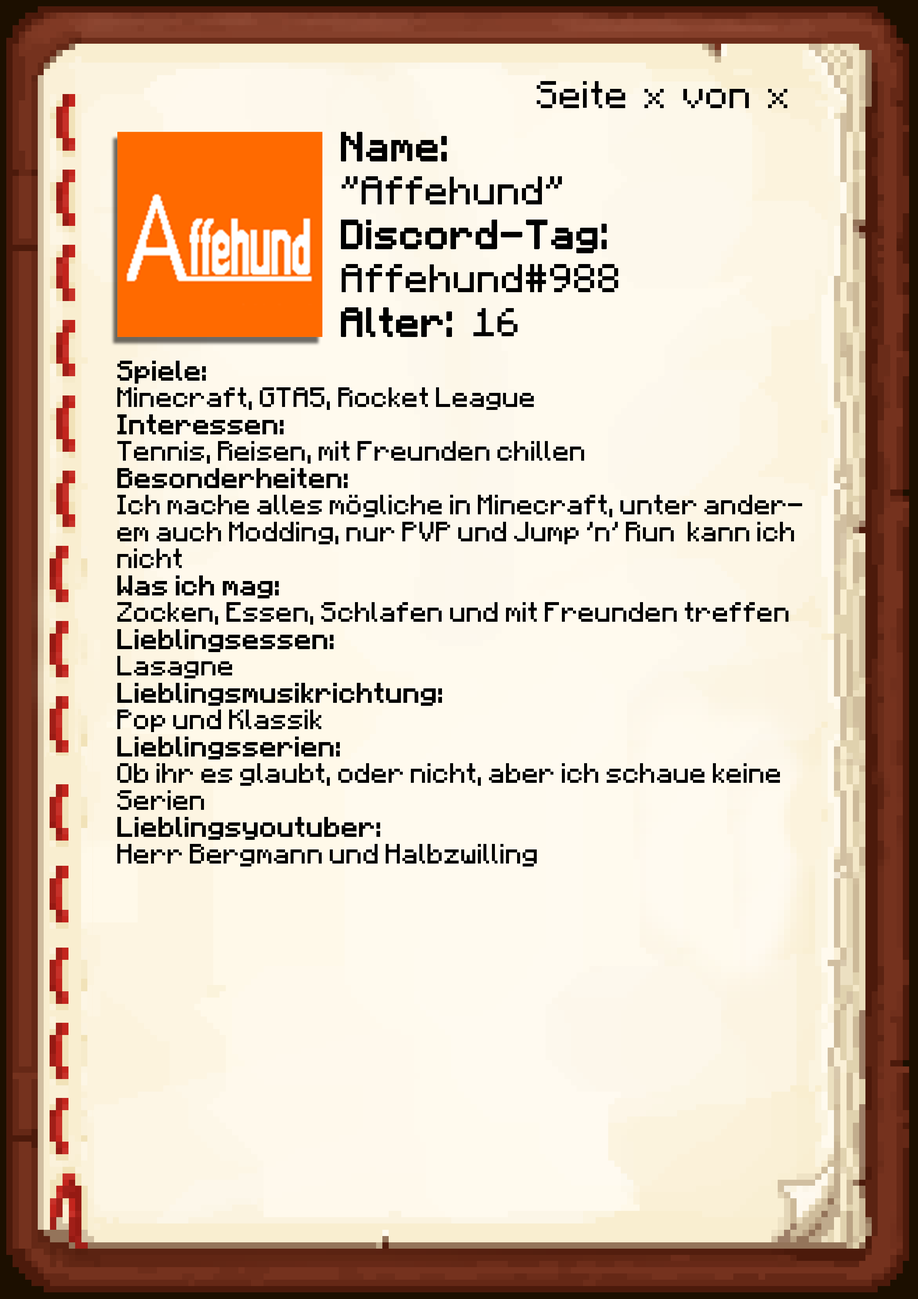
<style>
.page{position:relative;width:918px;height:1299px}
.page>*{position:absolute;margin:0}
.t1{font:38.6px "Minecraft-Regular";color:#000000}
.t2{font:40.1px/43.9px "Minecraft-Regular";color:#000000;font-weight:bold}
.t3{font:40.1px/43.9px "Minecraft-Regular";color:#000000}
.t4{font:22.4px "Minecraft";color:#000000}
.t5{font:22.4px "Minecraft";color:#000000;font-weight:bold}
</style>
<div class="page">
<p class="t1" style="left:537px;top:81px;width:250px;height:27px">Seite x von x</p>
<p class="t2" style="left:341px;top:132px;width:277px;height:205px">Name:<br><span class="t3">"Affehund"<br></span>Discord-Tag:<br><span class="t3">Affehund#988<br></span>Alter: <span class="t3">16</span></p>
<p class="t4" style="left:117px;top:361px;width:685px;height:505px"><span class="t5">Spiele: <br></span>Minecraft, GTA5, Rocket League<br><span class="t5">Interessen:<br></span>Tennis, Reisen, mit Freunden chillen<br><span class="t5">Besonderheiten:<br></span>Ich mache alles mögliche in Minecraft, unter anderem auch Modding, nur PVP und Jump ’n’ Run  kann ich nicht<br><span class="t5">Was ich mag:<br></span>Zocken, Essen, Schlafen und mit Freunden treffen<br><span class="t5">Lieblingsessen:<br></span>Lasagne<br><span class="t5">Lieblingsmusikrichtung:<br></span>Pop und Klassik<br><span class="t5">Lieblingsserien:<br></span>Ob ihr es glaubt, oder nicht, aber ich schaue keine Serien<br><span class="t5">Lieblingsyoutuber:<br></span>Herr Bergmann und Halbzwilling</p>
</div>
